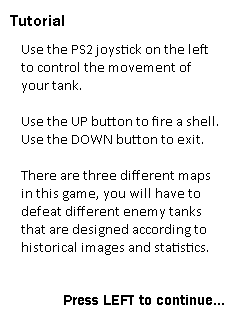
<style>
.page{position:relative;width:240px;height:320px;background:#ffffff}
.page>*{position:absolute;margin:0}
.t1{font:16px "FranklinGothic-Demi";color:#000000}
.t2{font:15px "Calibri";color:#000000}
.t3{font:15px "FranklinGothic-Demi";color:#000000}
</style>
<div class="page">
<p class="t1" style="left:10px;top:15px;width:54px;height:11px">Tutorial</p>
<p class="t2" style="left:21px;top:44px;width:197px;height:211px">Use the PS2 joystick on the left<br>to control the movement of<br>your tank.<br><br>Use the UP button to fire a shell.<br>Use the DOWN button to exit.<br><br>There are three different maps<br>in this game, you will have to<br>defeat different enemy tanks<br>that are designed according to<br>historical images and statistics.</p>
<p class="t3" style="left:64px;top:295px;width:160px;height:10px">Press LEFT to continue...</p>
</div>
